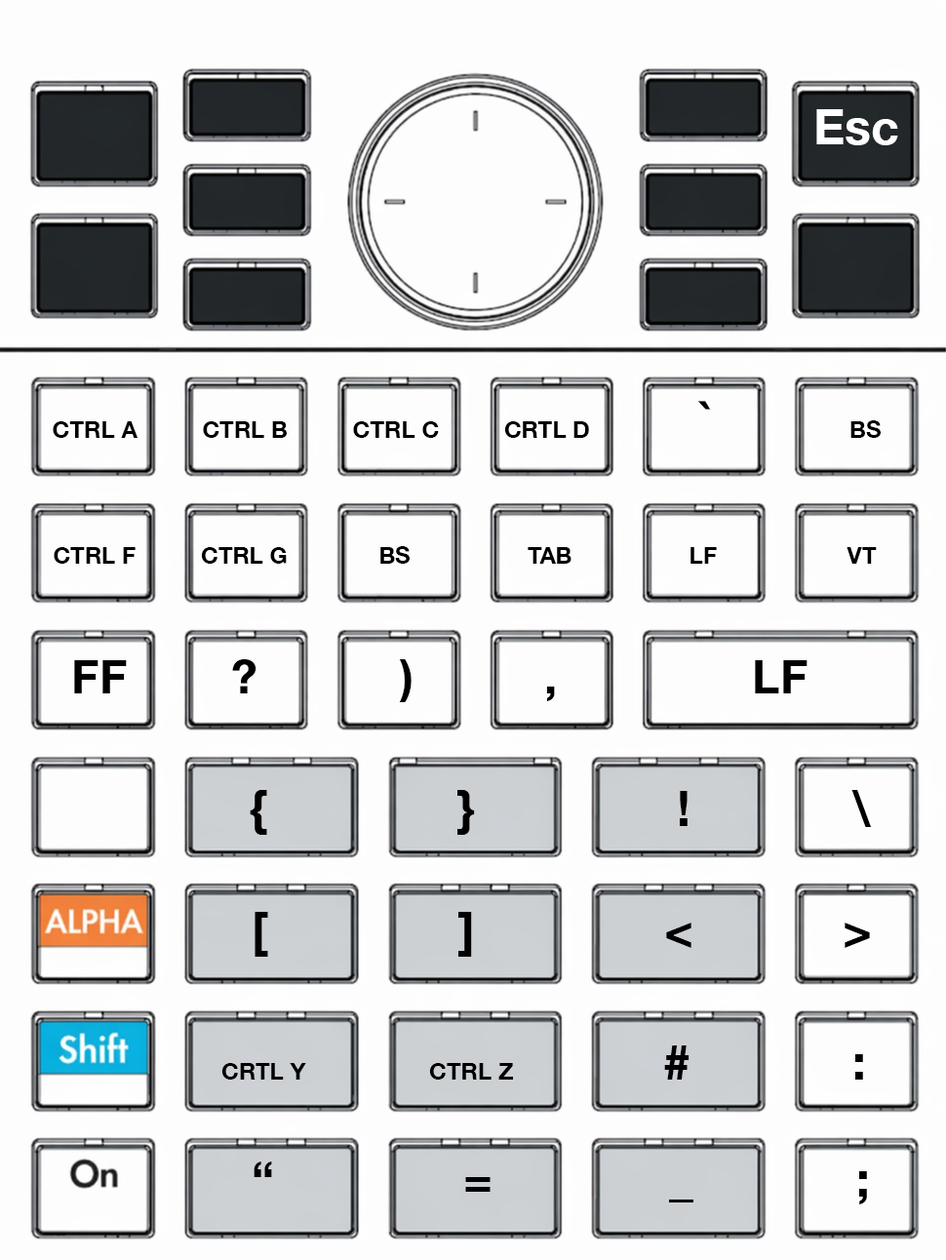
<style>
.page{position:relative;width:946px;height:1260px;background:#fdfdfd}
.page>*{position:absolute;margin:0}
.t1{font:48.8px "HelveticaNeue-Bold";color:#ffffff}
.t2{font:23.4px "HelveticaNeue-Bold";color:#000000}
.t3{font:46.8px "HelveticaNeue-Bold";color:#000000}
.t4{font:48.8px "HelveticaNeue-Bold";color:#000000}
</style>
<div class="page">
<p class="t1" style="left:816px;top:109px;width:82px;height:36px">Esc</p>
<p class="t2" style="left:53px;top:401px;width:828px;height:37px">CTRL A          CTRL B          CTRL C          CRTL D                 <span class="t3">`</span>                     BS</p>
<p class="t2" style="left:54px;top:546px;width:823px;height:18px">CTRL F          CTRL G              BS                  TAB                  LF                    VT</p>
<p class="t3" style="left:74px;top:659px;width:734px;height:43px">FF        ?           )          ,               LF</p>
<p class="t4" style="left:250px;top:790px;width:622px;height:45px">{              }               !            \</p>
<p class="t4" style="left:255px;top:912px;width:615px;height:45px">[              ]              &lt;           &gt;</p>
<p class="t2" style="left:221px;top:1046px;width:642px;height:34px">CRTL Y                   CTRL Z                       <span class="t4">#            :</span></p>
<p class="t4" style="left:254px;top:1162px;width:613px;height:43px">“              =             _            ;</p>
</div>
